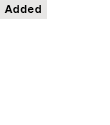
<style>
.page{position:relative;width:110px;height:125px;background:#ffffff}
.page>*{position:absolute;margin:0}
.t1{font:10.7px "CoolveticaRg-Regular";letter-spacing:0.08em;color:#000000;scale:1.15 1}
</style>
<div class="page">
<p class="t1" style="left:4px;top:5px;width:37px;height:8px">Added</p>
</div>
